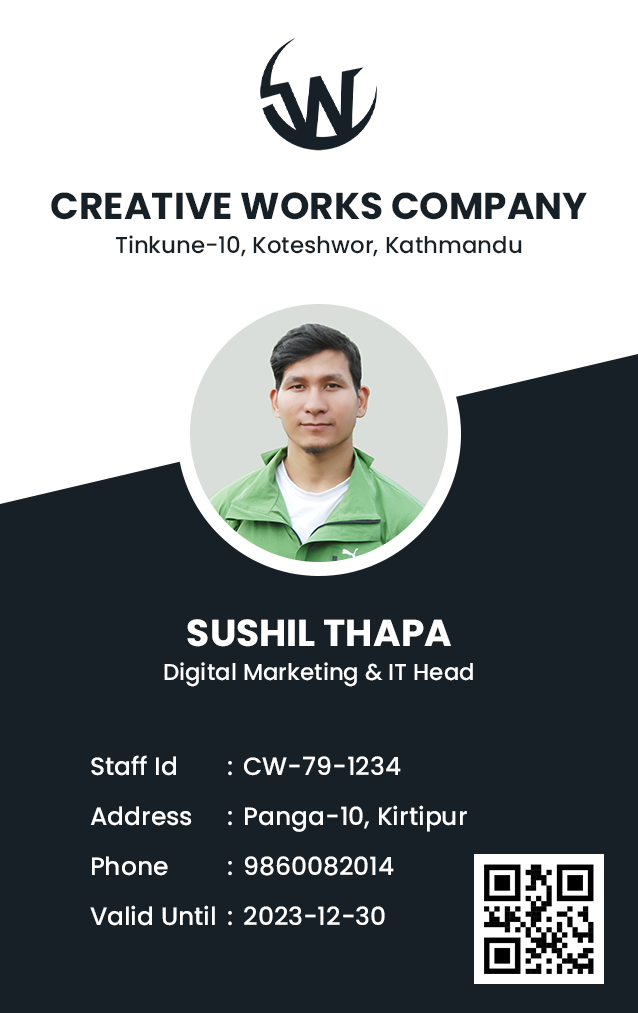
<style>
.page{position:relative;width:638px;height:1013px;background:#171f27}
.page>*{position:absolute;margin:0}
.t1{font:37.5px "Poppins-Bold";color:#171f27;text-transform:uppercase}
.t2{font:22.9px "Poppins-Medium";color:#171f27}
.t3{font:37.5px "Poppins-Bold";color:#ffffff;text-transform:uppercase}
.t4{font:22.9px "Poppins-Medium";color:#ffffff}
.t5{font:25px/50px "Poppins-Medium";color:#ffffff}
</style>
<div class="page">
<p class="t1" style="left:51px;top:192px;width:536px;height:28px">Creative Works Company</p>
<p class="t2" style="left:116px;top:235px;width:406px;height:22px">Tinkune-10, Koteshwor, Kathmandu</p>
<p class="t3" style="left:187px;top:619px;width:264px;height:28px">sushil thapa</p>
<p class="t4" style="left:164px;top:662px;width:309px;height:25px">Digital Marketing &amp; IT Head</p>
<p class="t5" style="left:90px;top:755px;width:125px;height:171px">Staff Id<br>Address<br>Phone<br>Valid Until</p>
<p class="t5" style="left:228px;top:761px;width:4px;height:165px">:<br>:<br>:<br>:</p>
<p class="t5" style="left:244px;top:756px;width:223px;height:169px">CW-79-1234<br>Panga-10, Kirtipur<br>9860082014<br>2023-12-30</p>
</div>
